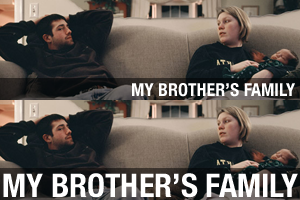
<style>
.page{position:relative;width:300px;height:200px}
.page>*{position:absolute;margin:0}
.t1{font:18px "HelveticaNeue-CondensedBold";color:#ffffff}
.t2{font:32.5px "HelveticaNeue-CondensedBold";color:#ffffff}
</style>
<div class="page">
<p class="t1" style="left:132px;top:83px;width:163px;height:14px">MY BROTHER’S FAMILY</p>
<p class="t2" style="left:3px;top:173px;width:295px;height:25px">MY BROTHER’S FAMILY</p>
</div>
